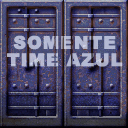
<style>
.page{position:relative;width:128px;height:128px}
.page>*{position:absolute;margin:0}
.t1{font:17.3px/17.3px "Arial-Black";letter-spacing:0.04em;color:#b2b8d1;text-transform:uppercase;font-weight:bold}
</style>
<div class="page">
<p class="t1" style="left:7px;top:35px;width:116px;height:32px;text-align:center">Somente<br>time AZUL</p>
</div>
